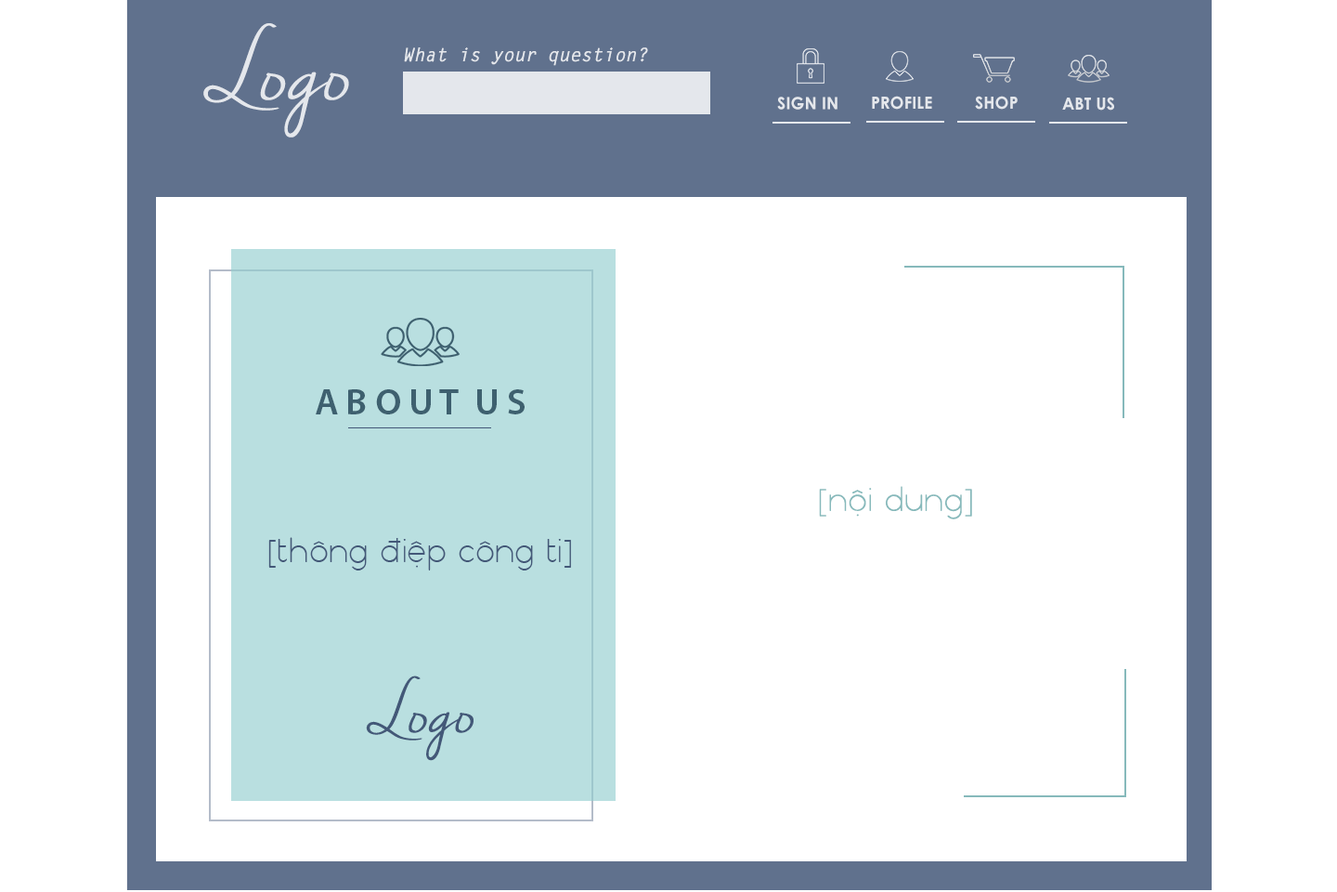
<style>
.page{position:relative;width:1337px;height:892px;background:#ffffff}
.page>*{position:absolute;margin:0}
.t1{font:88.7px "NellaSueDemo";color:#e4e7ec}
.t2{font:18.6px "LetterGothicStd-BoldSlanted";color:#e4e7ec}
.t3{font:16.7px "CenturyGothic-Bold";color:#e4e7ec}
.t4{font:37.2px "MyriadPro-Semibold";color:#3e606f}
.t5{font:32.5px "FS-Nokio-Light";color:#86b9bb}
.t6{font:32.5px "FS-Nokio-Light";color:#435878}
.t7{font:65.4px "NellaSueDemo";color:#435878}
</style>
<div class="page">
<p class="t1" style="left:203px;top:23px;width:146px;height:114px">Logo</p>
<p class="t2" style="left:404px;top:47px;width:244px;height:19px">What is your question?</p>
<p class="t3" style="left:777px;top:97px;width:61px;height:13px">SIGN IN</p>
<p class="t3" style="left:872px;top:96px;width:60px;height:14px">PROFILE</p>
<p class="t3" style="left:975px;top:96px;width:43px;height:14px">SHOP</p>
<p class="t3" style="left:1062px;top:97px;width:53px;height:14px">ABT US</p>
<p class="t4" style="left:316px;top:389px;width:209px;height:25px">A B O U T  U S</p>
<p class="t5" style="left:819px;top:486px;width:153px;height:33px">[nội dung]</p>
<p class="t6" style="left:268px;top:537px;width:303px;height:33px">[thông điệp công ti]</p>
<p class="t7" style="left:366px;top:675px;width:108px;height:86px">Logo</p>
</div>
